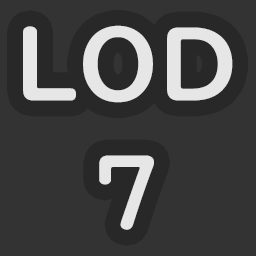
<style>
.page{position:relative;width:256px;height:256px;background:#333333}
.page>*{position:absolute;margin:0}
.t1{font:100px/128px "UDDigiKyokashoNK-B";color:#e6e6e6}
</style>
<div class="page">
<p class="t1" style="left:23px;top:25px;width:210px;height:205px;text-align:center">LOD<br>7</p>
</div>
